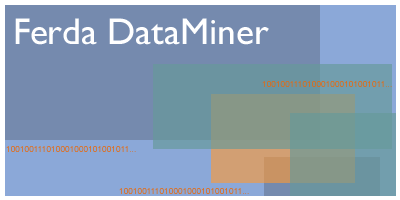
<style>
.page{position:relative;width:400px;height:200px;background:#758aae}
.page>*{position:absolute;margin:0}
.t1{font:37.5px "GillSansMT";color:#ffffff}
.t2{font:8.3px "ArialMT"}
</style>
<div class="page">
<p class="t1" style="left:15px;top:18px;width:254px;height:27px">Ferda DataMiner</p>
<p class="t2" style="left:262px;top:81px;width:130px;height:6px">100100111010001000101001011...</p>
<p class="t2" style="left:6px;top:146px;width:130px;height:6px">100100111010001000101001011...</p>
<p class="t2" style="left:119px;top:188px;width:130px;height:6px">100100111010001000101001011...</p>
</div>
